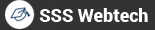
<style>
.page{position:relative;width:155px;height:30px;background:#333333}
.page>*{position:absolute;margin:0}
.t1{font:18px "Roboto-Black";color:#ffffff}
</style>
<div class="page">
<p class="t1" style="left:39px;top:8px;width:109px;height:14px">SSS Webtech</p>
</div>
